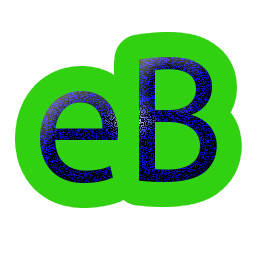
<style>
.page{position:relative;width:256px;height:256px;background:#ffffff}
.page>*{position:absolute;margin:0}
.t1{font:182.4px "MyriadPro-Regular"}
</style>
<div class="page">
<p class="t1" style="left:40px;top:57px;width:177px;height:127px">eB</p>
</div>
